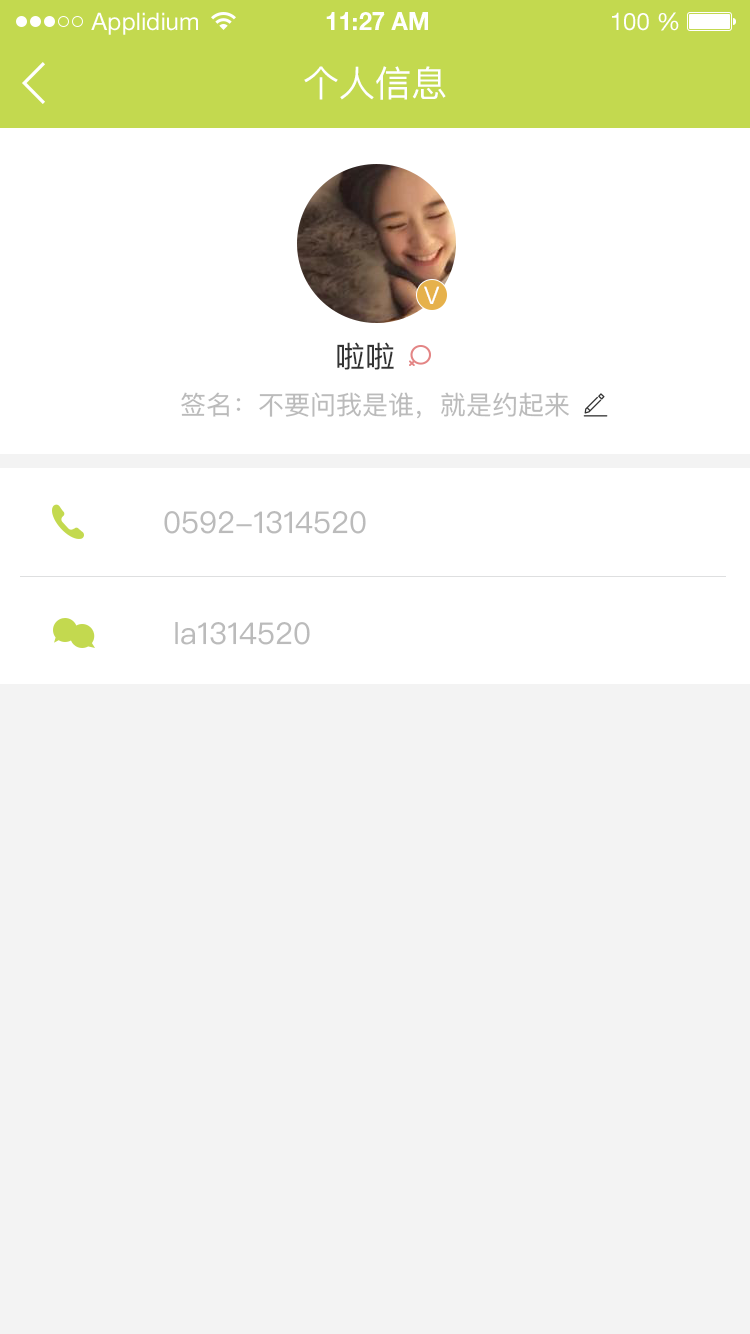
<style>
.page{position:relative;width:750px;height:1334px;background:#f3f3f3}
.page>*{position:absolute;margin:0}
.t1{font:24px "HelveticaNeueLTStd-Roman";color:#ffffff}
.t2{font:24px "HelveticaNeueLTStd-Bd";color:#ffffff}
.t3{font:36px "PingFangSC-Regular";color:#ffffff}
.t4{font:24px "PingFangSC-Regular";color:#ffffff}
.t5{font:30px "PingFangSC-Regular";color:#333333}
.t6{font:26px "PingFangSC-Regular";color:#bbbbbb}
.t7{font:30px "PingFangSC-Regular";color:#bbbbbb}
</style>
<div class="page">
<p class="t1" style="left:91px;top:12px;width:107px;height:23px">Applidium</p>
<p class="t2" style="left:326px;top:12px;width:102px;height:18px">11:27 AM</p>
<p class="t1" style="left:612px;top:12px;width:67px;height:19px">100 %</p>
<p class="t3" style="left:304px;top:66px;width:142px;height:34px">个人信息</p>
<p class="t4" style="left:424px;top:286px;width:16px;height:18px">V</p>
<p class="t5" style="left:337px;top:342px;width:57px;height:28px">啦啦</p>
<p class="t6" style="left:181px;top:392px;width:388px;height:27px">签名：不要问我是谁，就是约起来</p>
<p class="t7" style="left:164px;top:511px;width:202px;height:23px">0592-1314520</p>
<p class="t7" style="left:175px;top:622px;width:135px;height:23px">la1314520</p>
</div>
